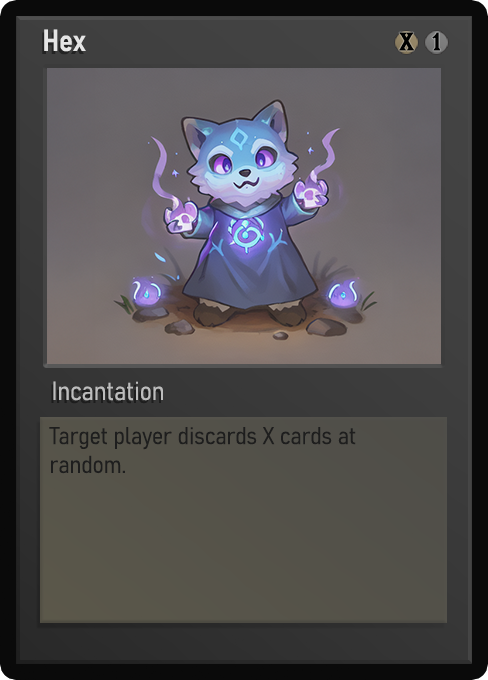
<style>
.page{position:relative;width:488px;height:680px}
.page>*{position:absolute;margin:0}
.t1{font:30px "Bahnschrift-SemiBoldSemiCondensed";color:#f2f2f2;font-weight:bold}
.t2{font:25px "WTRRoycroft";color:#000000;font-weight:bold;scale:1.09 1}
.t3{font:26px "Bahnschrift-LightSemiCondensed";color:#c8c8c8;font-weight:bold}
.t4{font:24px "Bahnschrift-LightSemiCondensed";color:#1e1e1e;font-weight:bold}
</style>
<div class="page">
<p class="t1" style="left:44px;top:29px;width:42px;height:23px;opacity:0.9">Hex</p>
<p class="t2" style="left:399px;top:32px;width:15px;height:19px">X</p>
<p class="t2" style="left:432px;top:32px;width:9px;height:19px">1</p>
<p class="t3" style="left:53px;top:381px;width:110px;height:20px;opacity:0.9">Incantation</p>
<p class="t4" style="left:49px;top:427px;width:307px;height:47px">Target player discards X cards at random.</p>
</div>
